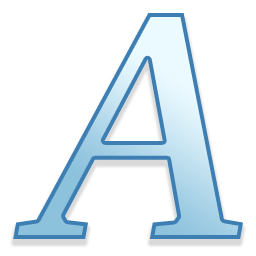
<style>
.page{position:relative;width:256px;height:256px;background:#ffffff}
.page>*{position:absolute;margin:0}
.t1{font:400px "DavidCLM-Bold";letter-spacing:0.4em;font-style:italic}
</style>
<div class="page">
<p class="t1" style="left:13px;top:13px;width:230px;height:226px">A</p>
</div>
